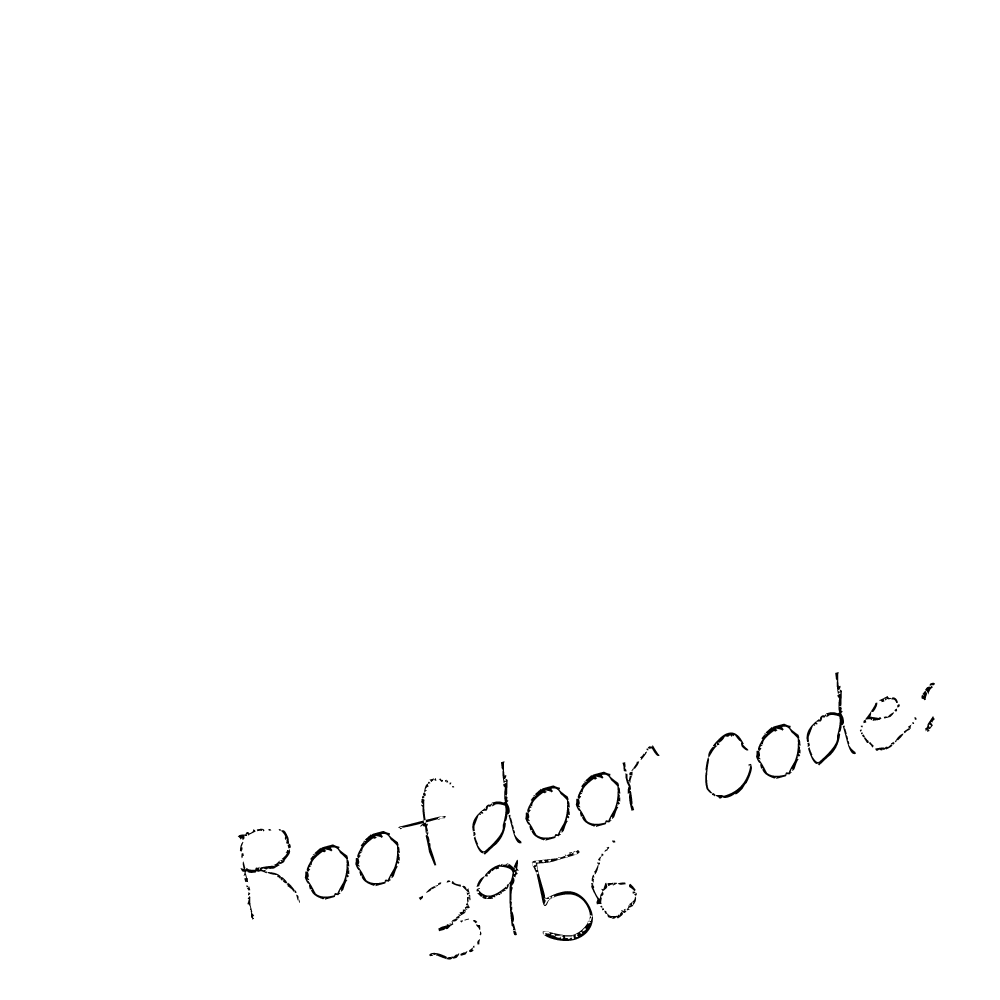
<style>
.page{position:relative;width:1000px;height:1000px;background:#ffffff}
.page>*{position:absolute;margin:0}
.t1{font:80.6px "ThinPencilHandwriting";color:#000000}
</style>
<div class="page">
<p class="t1" style="left:237px;top:672px;width:698px;height:288px;rotate:-15deg">Roofdoor code:<br>       3956</p>
</div>
